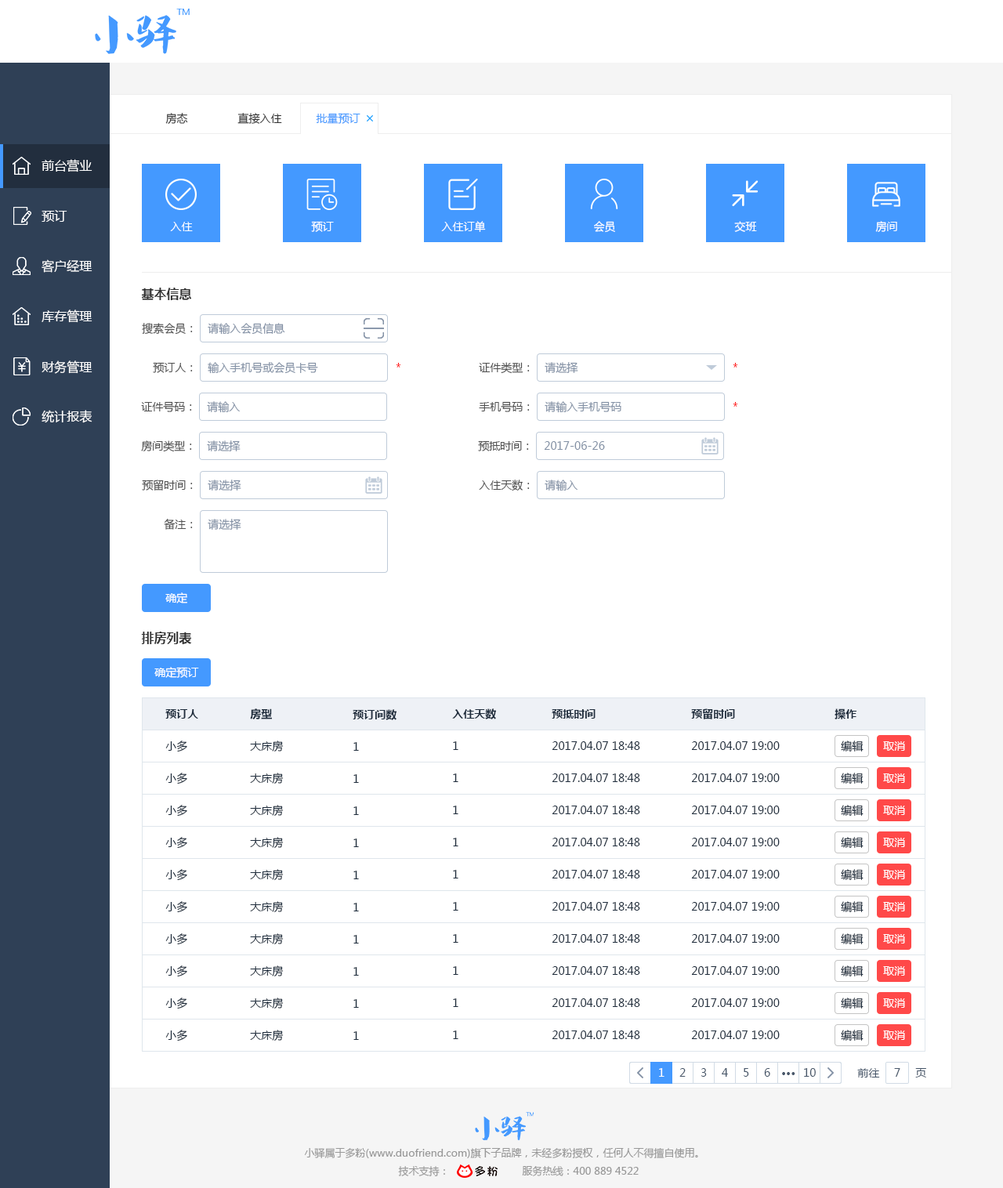
<style>
.page{position:relative;width:1003px;height:1188px;background:#ffffff}
.page>*{position:absolute;margin:0}
.t1{font:11px "MicrosoftYaHei";color:#333333}
.t2{font:11px "MicrosoftYaHei";color:#4499ff}
.t3{font:12.5px "MicrosoftYaHei";color:#ffffff}
.t4{font:11px "MicrosoftYaHei";color:#ffffff}
.t5{font:12.5px "MicrosoftYaHei-Bold";color:#333333}
.t6{font:11px "MicrosoftYaHei";color:#505050}
.t7{font:11px "MicrosoftYaHei";color:#8391a5}
.t8{font:11px "MicrosoftYaHei";color:#ff0000}
.t9{font:11px "MicrosoftYaHei-Bold";color:#1f2d3d}
.t10{font:11px "MicrosoftYaHei";color:#1f2d3d}
.t11{font:11px "MicrosoftYaHei";color:#48576a}
.t12{font:11px "MicrosoftYaHei-Bold";color:#48576a}
.t13{font:10.2px "MicrosoftYaHei";color:#999999}
</style>
<div class="page">
<p class="t1" style="left:165px;top:113px;width:23px;height:11px">房态</p>
<p class="t1" style="left:238px;top:113px;width:44px;height:11px">直接入住</p>
<p class="t2" style="left:316px;top:113px;width:45px;height:11px">批量预订</p>
<p class="t3" style="left:42px;top:159px;width:51px;height:13px">前台营业</p>
<p class="t3" style="left:42px;top:210px;width:25px;height:12px">预订</p>
<p class="t4" style="left:170px;top:222px;width:23px;height:9px">入住</p>
<p class="t4" style="left:311px;top:221px;width:23px;height:11px">预订</p>
<p class="t4" style="left:441px;top:221px;width:45px;height:11px">入住订单</p>
<p class="t4" style="left:594px;top:221px;width:21px;height:12px">会员</p>
<p class="t4" style="left:735px;top:221px;width:22px;height:11px">交班</p>
<p class="t4" style="left:876px;top:221px;width:22px;height:11px">房间</p>
<p class="t3" style="left:42px;top:259px;width:51px;height:14px">客户经理</p>
<p class="t5" style="left:141px;top:288px;width:51px;height:12px">基本信息</p>
<p class="t3" style="left:42px;top:310px;width:51px;height:13px">库存管理</p>
<p class="t6" style="left:142px;top:323px;width:51px;height:12px">搜索会员：</p>
<p class="t7" style="left:208px;top:323px;width:77px;height:12px">请输入会员信息</p>
<p class="t3" style="left:42px;top:361px;width:51px;height:13px">财务管理</p>
<p class="t6" style="left:153px;top:362px;width:40px;height:11px">预订人：</p>
<p class="t7" style="left:208px;top:362px;width:110px;height:12px">输入手机号或会员卡号</p>
<p class="t8" style="left:396px;top:363px;width:5px;height:5px">*</p>
<p class="t6" style="left:479px;top:362px;width:51px;height:12px">证件类型：</p>
<p class="t7" style="left:545px;top:362px;width:34px;height:11px">请选择</p>
<p class="t8" style="left:733px;top:363px;width:5px;height:5px">*</p>
<p class="t6" style="left:141px;top:401px;width:51px;height:11px">证件号码：</p>
<p class="t7" style="left:207px;top:401px;width:34px;height:12px">请输入</p>
<p class="t6" style="left:479px;top:401px;width:51px;height:11px">手机号码：</p>
<p class="t7" style="left:545px;top:401px;width:77px;height:12px">请输入手机号码</p>
<p class="t3" style="left:42px;top:410px;width:51px;height:13px">统计报表</p>
<p class="t8" style="left:733px;top:402px;width:5px;height:5px">*</p>
<p class="t6" style="left:141px;top:441px;width:51px;height:11px">房间类型：</p>
<p class="t7" style="left:207px;top:441px;width:34px;height:11px">请选择</p>
<p class="t6" style="left:478px;top:441px;width:51px;height:11px">预抵时间：</p>
<p class="t7" style="left:544px;top:441px;width:61px;height:9px">2017-06-26</p>
<p class="t6" style="left:142px;top:480px;width:51px;height:11px">预留时间：</p>
<p class="t7" style="left:208px;top:480px;width:33px;height:11px">请选择</p>
<p class="t6" style="left:479px;top:480px;width:51px;height:11px">入住天数：</p>
<p class="t7" style="left:545px;top:480px;width:34px;height:12px">请输入</p>
<p class="t6" style="left:164px;top:519px;width:29px;height:11px">备注：</p>
<p class="t7" style="left:208px;top:519px;width:33px;height:11px">请选择</p>
<p class="t4" style="left:165px;top:593px;width:22px;height:11px">确定</p>
<p class="t5" style="left:141px;top:632px;width:51px;height:13px">排房列表</p>
<p class="t4" style="left:154px;top:667px;width:45px;height:11px">确定预订</p>
<p class="t9" style="left:165px;top:709px;width:33px;height:10px">预订人</p>
<p class="t9" style="left:250px;top:709px;width:22px;height:11px">房型</p>
<p class="t9" style="left:353px;top:709px;width:44px;height:11px">预订间数</p>
<p class="t9" style="left:452px;top:709px;width:44px;height:11px">入住天数</p>
<p class="t9" style="left:552px;top:709px;width:44px;height:10px">预抵时间</p>
<p class="t9" style="left:691px;top:709px;width:44px;height:11px">预留时间</p>
<p class="t9" style="left:835px;top:709px;width:22px;height:11px">操作</p>
<p class="t10" style="left:165px;top:741px;width:22px;height:12px">小多</p>
<p class="t10" style="left:250px;top:741px;width:34px;height:12px">大床房</p>
<p class="t10" style="left:354px;top:742px;width:5px;height:9px">1</p>
<p class="t10" style="left:453px;top:742px;width:6px;height:8px">1</p>
<p class="t10" style="left:552px;top:742px;width:88px;height:8px">2017.04.07 18:48</p>
<p class="t10" style="left:691px;top:742px;width:89px;height:8px">2017.04.07 19:00</p>
<p class="t10" style="left:841px;top:741px;width:23px;height:11px">编辑</p>
<p class="t4" style="left:883px;top:742px;width:22px;height:9px">取消</p>
<p class="t10" style="left:165px;top:773px;width:22px;height:12px">小多</p>
<p class="t10" style="left:250px;top:773px;width:34px;height:12px">大床房</p>
<p class="t10" style="left:453px;top:774px;width:6px;height:8px">1</p>
<p class="t10" style="left:552px;top:774px;width:88px;height:8px">2017.04.07 18:48</p>
<p class="t10" style="left:691px;top:774px;width:89px;height:8px">2017.04.07 19:00</p>
<p class="t10" style="left:841px;top:773px;width:23px;height:11px">编辑</p>
<p class="t4" style="left:883px;top:774px;width:22px;height:9px">取消</p>
<p class="t10" style="left:354px;top:774px;width:5px;height:9px">1</p>
<p class="t10" style="left:165px;top:805px;width:22px;height:12px">小多</p>
<p class="t10" style="left:250px;top:805px;width:34px;height:12px">大床房</p>
<p class="t10" style="left:354px;top:807px;width:5px;height:8px">1</p>
<p class="t10" style="left:453px;top:806px;width:6px;height:8px">1</p>
<p class="t10" style="left:552px;top:806px;width:88px;height:8px">2017.04.07 18:48</p>
<p class="t10" style="left:691px;top:806px;width:89px;height:8px">2017.04.07 19:00</p>
<p class="t10" style="left:841px;top:805px;width:23px;height:11px">编辑</p>
<p class="t4" style="left:883px;top:806px;width:22px;height:9px">取消</p>
<p class="t10" style="left:165px;top:837px;width:22px;height:12px">小多</p>
<p class="t10" style="left:250px;top:837px;width:34px;height:12px">大床房</p>
<p class="t10" style="left:354px;top:839px;width:5px;height:8px">1</p>
<p class="t10" style="left:453px;top:838px;width:6px;height:9px">1</p>
<p class="t10" style="left:552px;top:838px;width:88px;height:9px">2017.04.07 18:48</p>
<p class="t10" style="left:691px;top:838px;width:89px;height:9px">2017.04.07 19:00</p>
<p class="t10" style="left:841px;top:837px;width:23px;height:11px">编辑</p>
<p class="t4" style="left:883px;top:838px;width:22px;height:9px">取消</p>
<p class="t10" style="left:165px;top:869px;width:22px;height:12px">小多</p>
<p class="t10" style="left:250px;top:869px;width:34px;height:12px">大床房</p>
<p class="t10" style="left:841px;top:869px;width:23px;height:11px">编辑</p>
<p class="t10" style="left:354px;top:871px;width:5px;height:9px">1</p>
<p class="t10" style="left:453px;top:870px;width:6px;height:9px">1</p>
<p class="t10" style="left:552px;top:870px;width:88px;height:9px">2017.04.07 18:48</p>
<p class="t10" style="left:691px;top:870px;width:89px;height:9px">2017.04.07 19:00</p>
<p class="t4" style="left:883px;top:870px;width:22px;height:10px">取消</p>
<p class="t10" style="left:165px;top:901px;width:22px;height:12px">小多</p>
<p class="t10" style="left:250px;top:901px;width:34px;height:12px">大床房</p>
<p class="t10" style="left:354px;top:903px;width:5px;height:9px">1</p>
<p class="t10" style="left:453px;top:902px;width:6px;height:9px">1</p>
<p class="t10" style="left:552px;top:902px;width:88px;height:9px">2017.04.07 18:48</p>
<p class="t10" style="left:691px;top:902px;width:89px;height:9px">2017.04.07 19:00</p>
<p class="t10" style="left:841px;top:901px;width:23px;height:11px">编辑</p>
<p class="t4" style="left:883px;top:902px;width:22px;height:10px">取消</p>
<p class="t10" style="left:165px;top:934px;width:22px;height:11px">小多</p>
<p class="t10" style="left:250px;top:934px;width:34px;height:11px">大床房</p>
<p class="t10" style="left:354px;top:935px;width:5px;height:9px">1</p>
<p class="t10" style="left:453px;top:934px;width:6px;height:9px">1</p>
<p class="t10" style="left:552px;top:934px;width:88px;height:9px">2017.04.07 18:48</p>
<p class="t10" style="left:691px;top:934px;width:89px;height:9px">2017.04.07 19:00</p>
<p class="t10" style="left:841px;top:934px;width:23px;height:11px">编辑</p>
<p class="t4" style="left:883px;top:934px;width:22px;height:10px">取消</p>
<p class="t10" style="left:165px;top:966px;width:22px;height:12px">小多</p>
<p class="t10" style="left:250px;top:966px;width:34px;height:12px">大床房</p>
<p class="t10" style="left:841px;top:966px;width:23px;height:11px">编辑</p>
<p class="t10" style="left:354px;top:967px;width:5px;height:9px">1</p>
<p class="t10" style="left:453px;top:967px;width:6px;height:8px">1</p>
<p class="t10" style="left:552px;top:967px;width:88px;height:8px">2017.04.07 18:48</p>
<p class="t10" style="left:691px;top:967px;width:89px;height:8px">2017.04.07 19:00</p>
<p class="t4" style="left:883px;top:967px;width:22px;height:9px">取消</p>
<p class="t10" style="left:165px;top:998px;width:22px;height:12px">小多</p>
<p class="t10" style="left:250px;top:998px;width:34px;height:12px">大床房</p>
<p class="t10" style="left:354px;top:999px;width:5px;height:9px">1</p>
<p class="t10" style="left:453px;top:999px;width:6px;height:8px">1</p>
<p class="t10" style="left:552px;top:999px;width:88px;height:8px">2017.04.07 18:48</p>
<p class="t10" style="left:691px;top:999px;width:89px;height:8px">2017.04.07 19:00</p>
<p class="t10" style="left:841px;top:998px;width:23px;height:11px">编辑</p>
<p class="t4" style="left:883px;top:999px;width:22px;height:9px">取消</p>
<p class="t10" style="left:165px;top:1030px;width:22px;height:12px">小多</p>
<p class="t10" style="left:250px;top:1030px;width:34px;height:12px">大床房</p>
<p class="t10" style="left:354px;top:1032px;width:5px;height:8px">1</p>
<p class="t10" style="left:453px;top:1031px;width:6px;height:8px">1</p>
<p class="t10" style="left:552px;top:1031px;width:88px;height:8px">2017.04.07 18:48</p>
<p class="t10" style="left:691px;top:1031px;width:89px;height:8px">2017.04.07 19:00</p>
<p class="t10" style="left:841px;top:1030px;width:23px;height:11px">编辑</p>
<p class="t4" style="left:883px;top:1031px;width:22px;height:9px">取消</p>
<p class="t4" style="left:659px;top:1068px;width:6px;height:9px">1</p>
<p class="t11" style="left:680px;top:1068px;width:6px;height:9px">2</p>
<p class="t11" style="left:701px;top:1068px;width:6px;height:9px">3</p>
<p class="t11" style="left:722px;top:1068px;width:6px;height:9px">4</p>
<p class="t11" style="left:744px;top:1068px;width:5px;height:9px">5</p>
<p class="t11" style="left:764px;top:1068px;width:7px;height:9px">6</p>
<p class="t12" style="left:782px;top:1072px;width:14px;height:4px">···</p>
<p class="t11" style="left:804px;top:1068px;width:12px;height:9px">10</p>
<p class="t11" style="left:858px;top:1068px;width:22px;height:10px">前往</p>
<p class="t11" style="left:894px;top:1068px;width:7px;height:9px">7</p>
<p class="t11" style="left:916px;top:1068px;width:11px;height:10px">页</p>
<p class="t13" style="left:304px;top:1148px;width:394px;height:11px">小驿属于多粉(www.duofriend.com)旗下子品牌，未经多粉授权，任何人不得擅自使用。</p>
<p class="t13" style="left:398px;top:1166px;width:47px;height:11px">技术支持：</p>
<p class="t13" style="left:522px;top:1166px;width:117px;height:11px">服务热线：400 889 4522</p>
</div>
